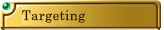
<style>
.page{position:relative;width:164px;height:30px}
.page>*{position:absolute;margin:0}
.t1{font:13.3px "CenturySchoolbook";letter-spacing:0.025em;color:#382005}
</style>
<div class="page">
<p class="t1" style="left:22px;top:10px;width:64px;height:13px">Targeting</p>
</div>
